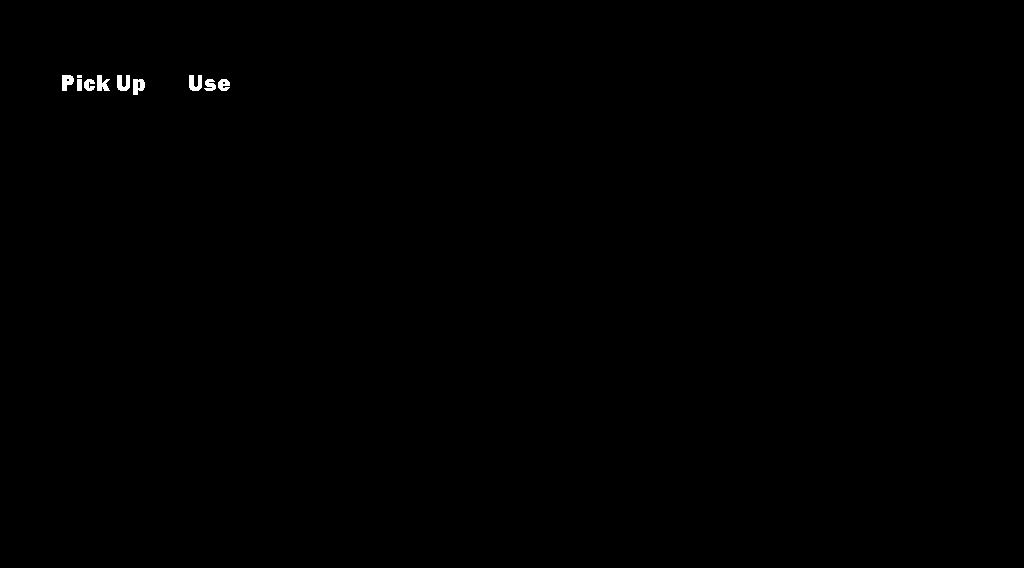
<style>
.page{position:relative;width:1024px;height:568px;background:#000000}
.page>*{position:absolute;margin:0}
.t1{font:24px "FranklinGothic-Heavy";color:#ffffff}
</style>
<div class="page">
<p class="t1" style="left:62px;top:75px;width:83px;height:20px">Pick Up</p>
<p class="t1" style="left:189px;top:75px;width:41px;height:16px">Use</p>
</div>
